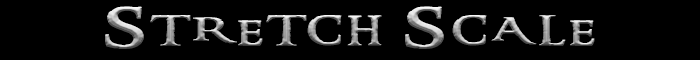
<style>
.page{position:relative;width:700px;height:60px;background:#000000}
.page>*{position:absolute;margin:0}
.t1{font:40.8px "RingbearerMedium";letter-spacing:0.075em;font-variant:small-caps;font-weight:bold;scale:1.67 1}
</style>
<div class="page">
<p class="t1" style="left:105px;top:6px;width:490px;height:43px">Stretch Scale</p>
<p class="t1" style="left:105px;top:6px;width:490px;height:43px">Stretch Scale</p>
</div>
